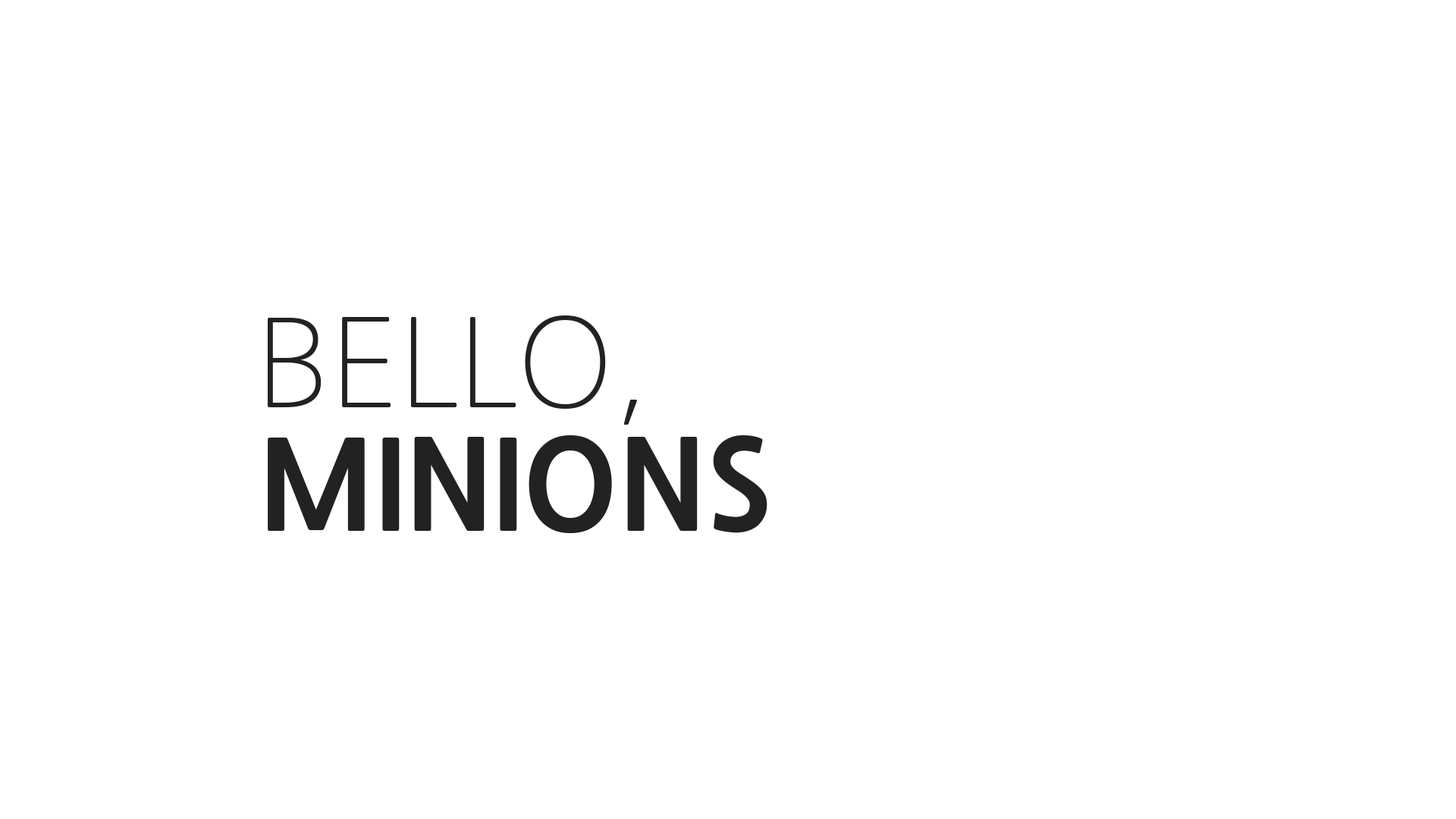
<style>
.page{position:relative;width:1456px;height:819px;background:#ffffff}
.page>*{position:absolute;margin:0}
.t1{font:121.3px "NanumGothicLight";color:#222222}
.t2{font:121.3px "NanumGothicExtraBold";color:#222222}
</style>
<div class="page">
<p class="t1" style="left:268px;top:315px;width:369px;height:110px">BELLO,</p>
<p class="t2" style="left:268px;top:435px;width:499px;height:98px">MINIONS</p>
</div>
